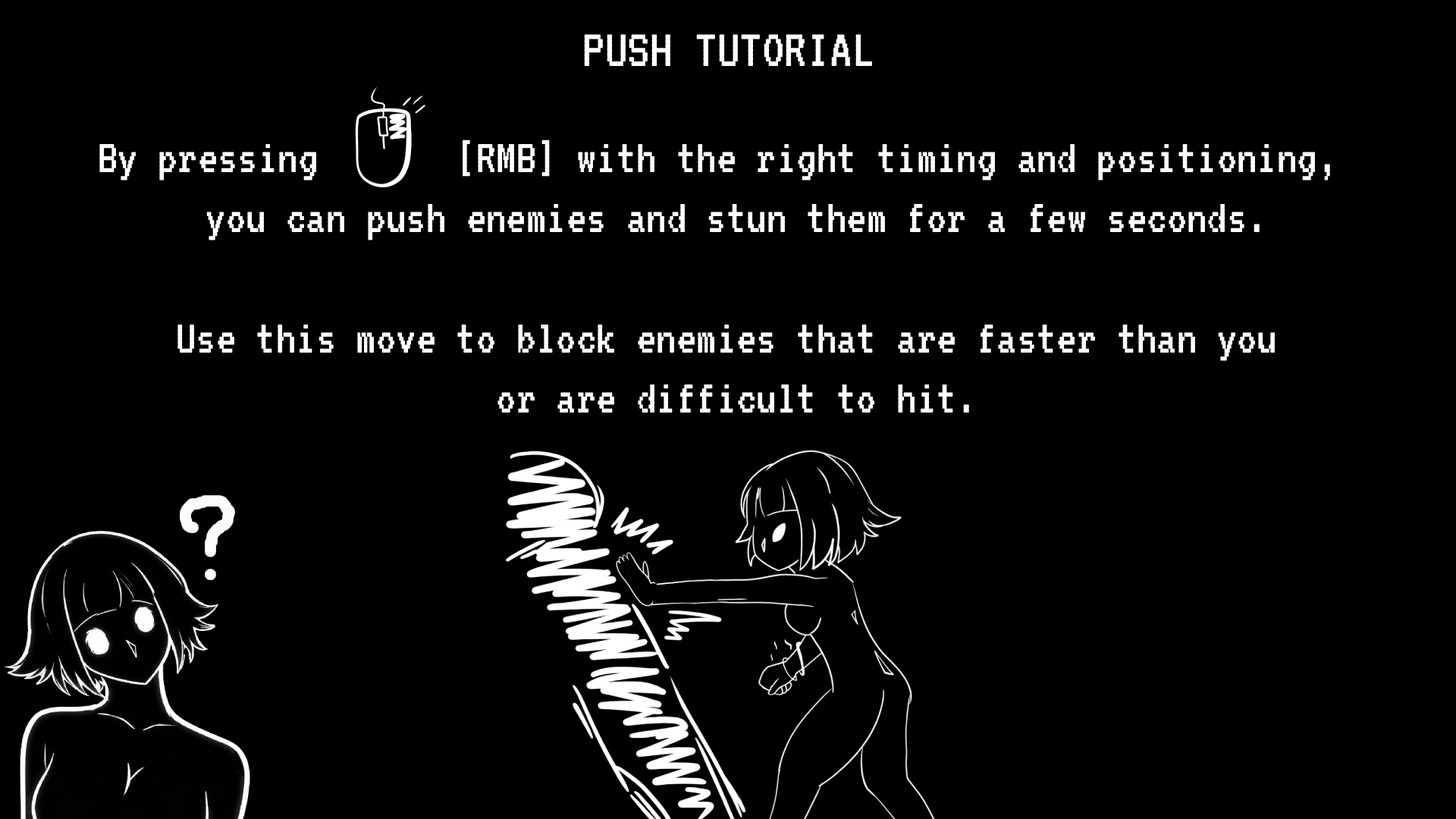
<style>
.page{position:relative;width:1456px;height:819px;background:#000000}
.page>*{position:absolute;margin:0}
.t1{font:56.1px "VT323-Regular";color:#ffffff}
.t2{font:50px "VT323-Regular";color:#ffffff}
</style>
<div class="page">
<p class="t1" style="left:584px;top:34px;width:288px;height:32px">PUSH TUTORIAL</p>
<p class="t2" style="left:99px;top:140px;width:1231px;height:273px;text-align:center">By pressing      [RMB] with the right timing and positioning, <br>you can push enemies and stun them for a few seconds.<br><br>Use this move to block enemies that are faster than you <br>or are difficult to hit.</p>
</div>
